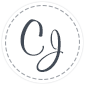
<style>
.page{position:relative;width:85px;height:85px;background:#ffffff}
.page>*{position:absolute;margin:0}
.t1{font:45.8px "MurrayHillBT-Bold";letter-spacing:0.32em;color:#434b56;text-transform:uppercase}
</style>
<div class="page">
<p class="t1" style="left:20px;top:19px;width:24px;height:37px">c</p>
<p class="t1" style="left:36px;top:29px;width:28px;height:43px">J</p>
</div>
